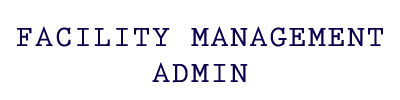
<style>
.page{position:relative;width:400px;height:100px;background:#ffffff}
.page>*{position:absolute;margin:0}
.t1{font:30px "PrestigeEliteStd-Bd";letter-spacing:0.05em;color:#0d004c;text-transform:uppercase}
</style>
<div class="page">
<p class="t1" style="left:17px;top:26px;width:366px;height:57px;text-align:center">FACILITY MANAGEMENT<br>ADMIN</p>
</div>
